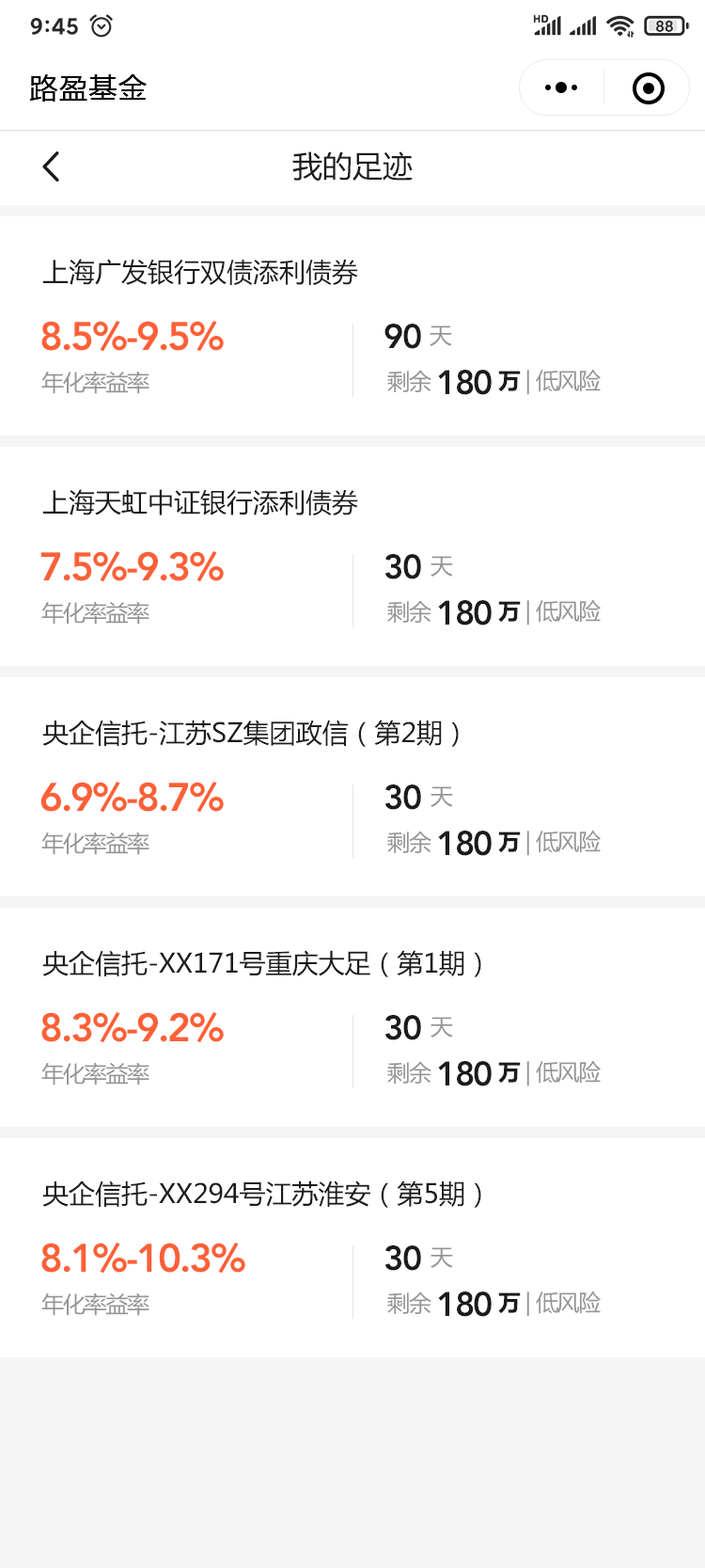
<style>
.page{position:relative;width:705px;height:1568px;background:#ffffff}
.page>*{position:absolute;margin:0}
.t1{font:28.2px "MicrosoftYaHei";letter-spacing:0.05em;color:#000000}
.t2{font:30.1px "MicrosoftYaHei";color:#1b1b1b}
.t3{font:26.3px "MicrosoftYaHei";color:#1b1b1b}
.t4{font:39.5px "AvenirLTStd-Heavy";letter-spacing:-0.05em;color:#fd6036}
.t5{font:33.9px "AvenirLTStd-Heavy";letter-spacing:-0.05em;color:#1b1b1b}
.t6{font:22.6px "MicrosoftYaHei";letter-spacing:-0.05em;color:#959595}
.t7{font:22.6px "MicrosoftYaHei-Bold";letter-spacing:-0.05em;color:#1b1b1b}
</style>
<div class="page">
<p class="t1" style="left:29px;top:74px;width:118px;height:28px">路盈基金</p>
<p class="t2" style="left:293px;top:151px;width:120px;height:31px">我的足迹</p>
<p class="t3" style="left:42px;top:259px;width:316px;height:26px">上海广发银行双债添利债券</p>
<p class="t4" style="left:41px;top:321px;width:183px;height:31px">8.5%-9.5%</p>
<p class="t5" style="left:385px;top:324px;width:36px;height:25px">90</p>
<p class="t6" style="left:430px;top:325px;width:22px;height:21px">天</p>
<p class="t6" style="left:41px;top:371px;width:109px;height:23px">年化率益率</p>
<p class="t6" style="left:388px;top:371px;width:44px;height:21px">剩余</p>
<p class="t5" style="left:438px;top:370px;width:54px;height:25px">180</p>
<p class="t6" style="left:499px;top:370px;width:102px;height:25px"><span class="t7">万</span> | 低风险</p>
<p class="t3" style="left:42px;top:489px;width:316px;height:26px">上海天虹中证银行添利债券</p>
<p class="t4" style="left:40px;top:551px;width:184px;height:31px">7.5%-9.3%</p>
<p class="t5" style="left:385px;top:554px;width:36px;height:25px">30</p>
<p class="t6" style="left:431px;top:556px;width:22px;height:21px">天</p>
<p class="t6" style="left:41px;top:601px;width:109px;height:24px">年化率益率</p>
<p class="t6" style="left:388px;top:601px;width:44px;height:22px">剩余</p>
<p class="t5" style="left:438px;top:600px;width:54px;height:26px">180</p>
<p class="t6" style="left:499px;top:600px;width:102px;height:26px"><span class="t7">万</span> | 低风险</p>
<p class="t3" style="left:42px;top:720px;width:417px;height:27px">央企信托-江苏SZ集团政信（第2期）</p>
<p class="t4" style="left:40px;top:782px;width:184px;height:31px">6.9%-8.7%</p>
<p class="t5" style="left:385px;top:784px;width:36px;height:26px">30</p>
<p class="t6" style="left:431px;top:786px;width:22px;height:21px">天</p>
<p class="t6" style="left:41px;top:832px;width:109px;height:23px">年化率益率</p>
<p class="t6" style="left:388px;top:832px;width:44px;height:21px">剩余</p>
<p class="t5" style="left:438px;top:831px;width:54px;height:25px">180</p>
<p class="t6" style="left:499px;top:831px;width:102px;height:25px"><span class="t7">万</span> | 低风险</p>
<p class="t3" style="left:42px;top:950px;width:440px;height:27px">央企信托-XX171号重庆大足（第1期）</p>
<p class="t4" style="left:41px;top:1012px;width:183px;height:31px">8.3%-9.2%</p>
<p class="t5" style="left:385px;top:1015px;width:36px;height:25px">30</p>
<p class="t6" style="left:431px;top:1017px;width:22px;height:20px">天</p>
<p class="t6" style="left:41px;top:1062px;width:109px;height:23px">年化率益率</p>
<p class="t6" style="left:388px;top:1062px;width:44px;height:22px">剩余</p>
<p class="t5" style="left:438px;top:1061px;width:54px;height:25px">180</p>
<p class="t6" style="left:499px;top:1061px;width:102px;height:25px"><span class="t7">万</span> | 低风险</p>
<p class="t3" style="left:42px;top:1180px;width:440px;height:28px">央企信托-XX294号江苏淮安（第5期）</p>
<p class="t4" style="left:41px;top:1243px;width:204px;height:31px">8.1%-10.3%</p>
<p class="t5" style="left:385px;top:1245px;width:36px;height:26px">30</p>
<p class="t6" style="left:431px;top:1247px;width:22px;height:21px">天</p>
<p class="t6" style="left:41px;top:1292px;width:109px;height:24px">年化率益率</p>
<p class="t6" style="left:388px;top:1292px;width:44px;height:22px">剩余</p>
<p class="t5" style="left:438px;top:1291px;width:54px;height:26px">180</p>
<p class="t6" style="left:499px;top:1291px;width:102px;height:26px"><span class="t7">万</span> | 低风险</p>
</div>
